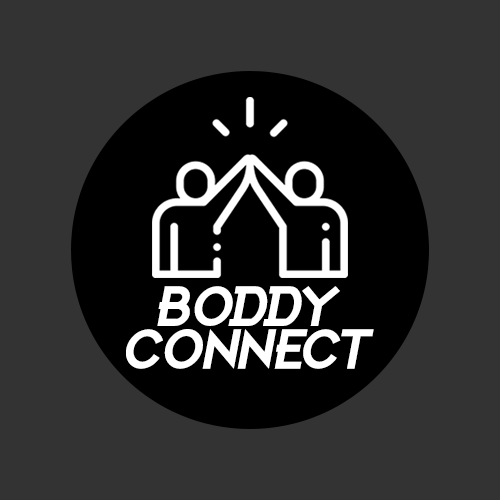
<style>
.page{position:relative;width:500px;height:500px;background:#333333}
.page>*{position:absolute;margin:0}
.t1{font:56.3px/42.8px "HBMForistaRegular";letter-spacing:0.02em;color:#ffffff;font-style:italic;scale:1.07 1}
</style>
<div class="page">
<p class="t1" style="left:126px;top:286px;width:248px;height:83px;text-align:center">Boddy<br>connect</p>
</div>
